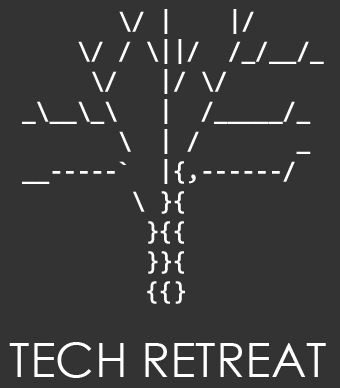
<style>
.page{position:relative;width:340px;height:388px;background:#333333}
.page>*{position:absolute;margin:0}
.t1{font:25px "Consolas-Bold";color:#ffffff}
.t2{font:48px "CenturyGothic";color:#ffffff}
</style>
<div class="page">
<p class="t1" style="left:22px;top:9px;width:302px;height:295px">\/ |    |/      <br>        \/ / \||/  /_/__/_ <br>         \/   |/ \/        <br>    _\__\_\   |  /_____/_  <br>           \  | /       _  <br>    __-----`  |{,------/   <br>            \ }{           <br>             }{{           <br>             }}{           <br>             {{}</p>
<p class="t2" style="left:9px;top:342px;width:317px;height:36px">TECH RETREAT</p>
</div>
